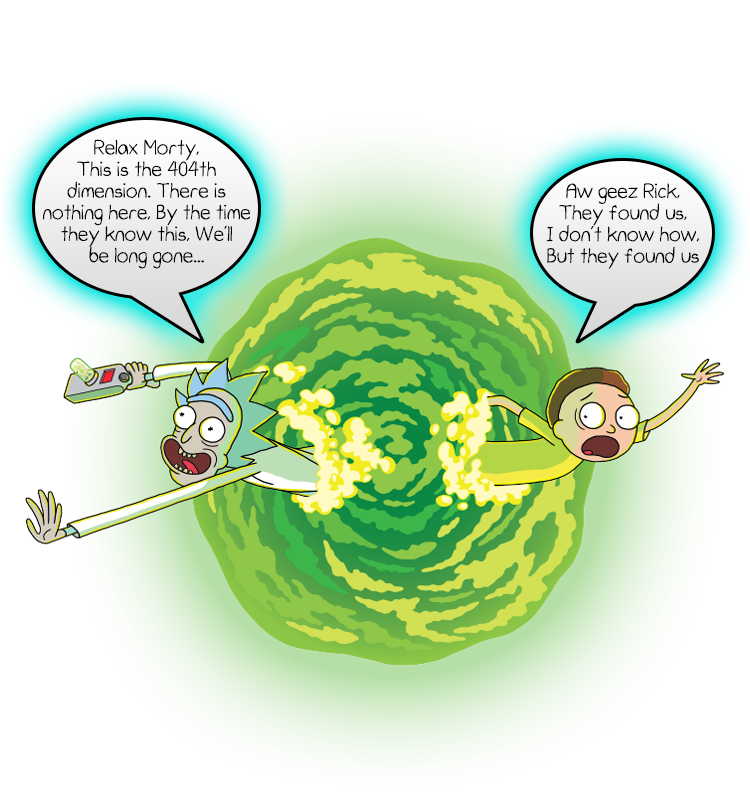
<style>
.page{position:relative;width:750px;height:800px;background:#ffffff}
.page>*{position:absolute;margin:0}
.t1{font:18px "Children-Regular";color:#000000}
</style>
<div class="page">
<p class="t1" style="left:43px;top:139px;width:207px;height:130px;text-align:center">Relax Morty,<br>This is the 404th dimension. There is nothing here, By the time they know this, We’ll be long gone...</p>
<p class="t1" style="left:546px;top:183px;width:153px;height:86px;text-align:center">Aw geez Rick, <br>They found us, <br>I don’t know how, <br>But they found us</p>
</div>
